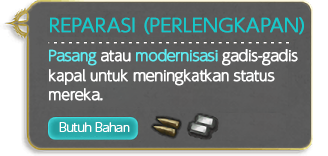
<style>
.page{position:relative;width:328px;height:156px}
.page>*{position:absolute;margin:0}
.t1{font:18px "UDShinGoPro-Light";color:#14c9cb;font-weight:bold}
.t2{font:14px/40px "UDShinGoPro-Light";letter-spacing:-0.04em;color:#ffffff;font-weight:bold}
.t3{font:14px/40px "UDShinGoPro-Light";letter-spacing:-0.04em;color:#5eedf3;font-weight:bold}
.t4{font:12px "UDShinGoPro-Light";letter-spacing:-0.04em;color:#ffffff}
</style>
<div class="page">
<p class="t1" style="left:50px;top:17px;width:254px;height:18px">REPARASI (PERLENGKAPAN)</p>
<p class="t2" style="left:49px;top:49px;width:249px;height:52px"><span class="t3">Pasang </span>atau <span class="t3">modernisasi </span>gadis-gadis<br>kapal untuk meningkatkan status <br>mereka.</p>
<p class="t4" style="left:59px;top:122px;width:71px;height:10px">Butuh Bahan</p>
</div>
